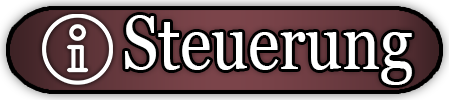
<style>
.page{position:relative;width:449px;height:100px}
.page>*{position:absolute;margin:0}
.t1{font:76.4px "Georgia";letter-spacing:-0.005em;color:#ffffff;scale:0.85 1}
</style>
<div class="page">
<p class="t1" style="left:125px;top:15px;width:287px;height:70px">Steuerung</p>
</div>
